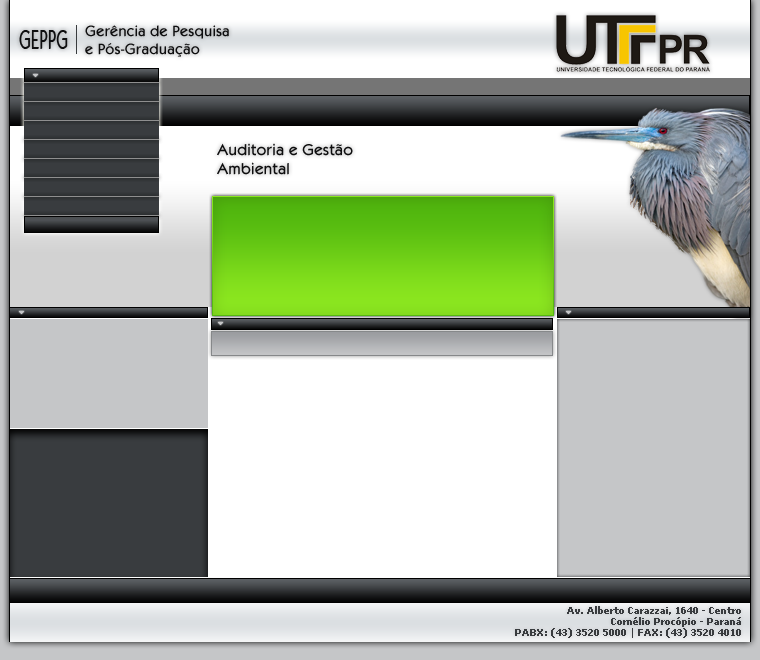
<style>
.page{position:relative;width:760px;height:660px;background:#ffffff}
.page>*{position:absolute;margin:0}
.t1{font:27.5px "KabobRegular";color:#0e0e0f;scale:0.58 1}
.t2{font:15px "KabobRegular";color:#0e0e0f}
.t3{font:16px "KabobRegular";color:#0e0e0f}
.t4{font:9px "Verdana-Bold";color:#393c3f}
</style>
<div class="page">
<p class="t1" style="left:19px;top:30px;width:49px;height:19px">GEPPG</p>
<p class="t2" style="left:85px;top:25px;width:144px;height:32px">Gerência de Pesquisa <br>e Pós-Graduação</p>
<p class="t3" style="left:217px;top:143px;width:136px;height:32px">Auditoria e Gestão <br>Ambiental</p>
<p class="t4" style="left:515px;top:606px;width:226px;height:32px;text-align:right">Av. Alberto Carazzai, 1640 - Centro<br>Cornélio Procópio - Paraná<br>PABX: (43) 3520 5000 | FAX: (43) 3520 4010</p>
</div>
